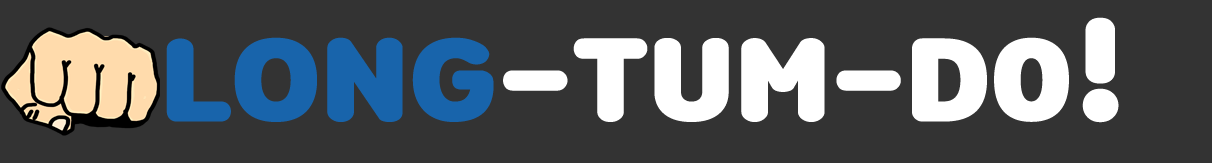
<style>
.page{position:relative;width:1212px;height:163px;background:#333333}
.page>*{position:absolute;margin:0}
.t1{font:161.7px "FCHomeBlack";color:#ffffff}
.t2{font:161.7px "FCHomeBlack";color:#1864ab}
.t3{font:200px "FCHomeBlack";color:#ffffff}
</style>
<div class="page">
<p class="t1" style="left:166px;top:17px;width:953px;height:106px"><span class="t2">LONG</span>-TUM-D0<span class="t3">!</span></p>
</div>
